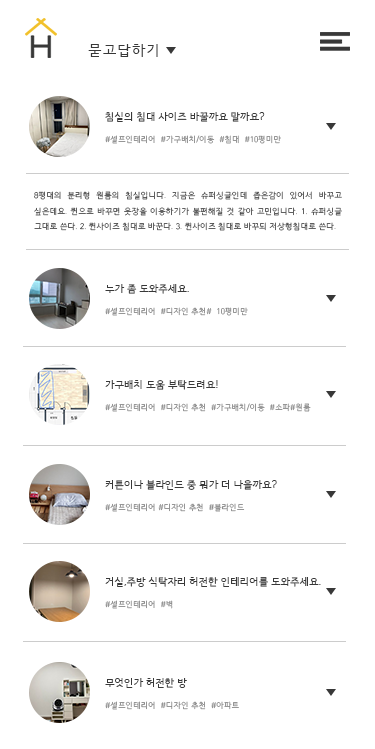
<style>
.page{position:relative;width:375px;height:749px;background:#ffffff}
.page>*{position:absolute;margin:0}
.t1{font:14px "HCRDotum";letter-spacing:0.1em;color:#383838}
.t2{font:10px "HCRDotum";color:#383838}
.t3{font:8px "HCRDotum";color:#828282}
.t4{font:8px/15.4px "HCRDotum"}
</style>
<div class="page">
<p class="t1" style="left:88px;top:44px;width:70px;height:13px">묻고답하기</p>
<p class="t2" style="left:105px;top:112px;width:160px;height:10px">침실의 침대 사이즈 바꿀까요 말까요?</p>
<p class="t3" style="left:105px;top:135px;width:176px;height:9px">#셀프인테리어  #가구배치/이동  #침대  #10평미만</p>
<p class="t4" style="left:34px;top:191px;width:308px;height:40px;text-align:justify">8평대의 분리형 원룸의 침실입니다. 지금은 슈퍼싱글인데 좁은감이 있어서 바꾸고 싶은데요. 퀸으로 바꾸면 옷장을 이용하기가 불편해질 것 같아 고민입니다. 1. 슈퍼싱글 그대로 쓴다. 2. 퀸사이즈 침대로 바꾼다. 3. 퀸사이즈 침대로 바꾸되 저상형침대로 쓴다.</p>
<p class="t2" style="left:105px;top:284px;width:84px;height:10px">누가 좀 도와주세요.</p>
<p class="t3" style="left:105px;top:307px;width:143px;height:9px">#셀프인테리어  #디자인 추천#  10평미만</p>
<p class="t2" style="left:105px;top:380px;width:113px;height:10px">가구배치 도움 부탁드려요!</p>
<p class="t3" style="left:105px;top:403px;width:206px;height:9px">#셀프인테리어  #디자인 추천  #가구배치/이동  #소파#원룸</p>
<p class="t2" style="left:105px;top:480px;width:172px;height:10px">커튼이나 블라인드 중 뭐가 더 나을까요?</p>
<p class="t3" style="left:105px;top:503px;width:140px;height:9px">#셀프인테리어 #디자인 추천  #블라인드</p>
<p class="t2" style="left:105px;top:577px;width:216px;height:10px">거실,주방 식탁자리 허전한 인테리어를 도와주세요.</p>
<p class="t3" style="left:105px;top:600px;width:68px;height:9px">#셀프인테리어  #벽</p>
<p class="t2" style="left:105px;top:678px;width:82px;height:10px">무엇인가 허전한 방</p>
<p class="t3" style="left:105px;top:701px;width:134px;height:9px">#셀프인테리어  #디자인 추천  #아파트</p>
</div>
